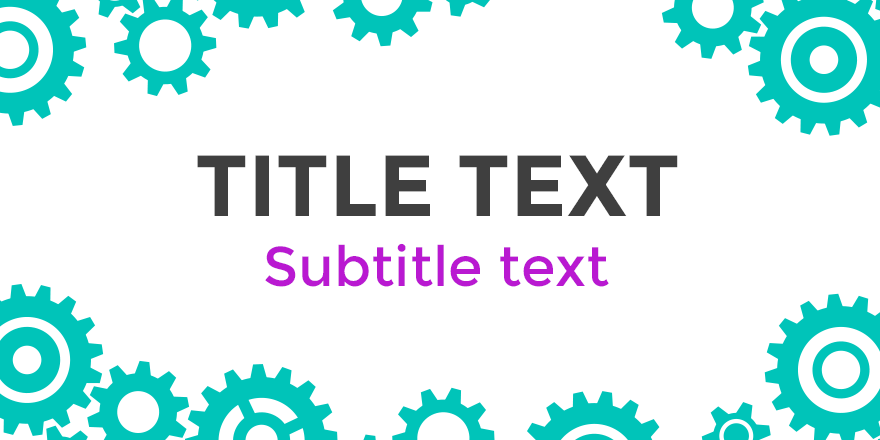
<style>
.page{position:relative;width:880px;height:440px;background:#ffffff}
.page>*{position:absolute;margin:0}
.t1{font:86.6px "Montserrat-Bold";color:#3f3f3f}
.t2{font:55.6px "Montserrat-Regular";color:#b919d1}
</style>
<div class="page">
<p class="t1" style="left:197px;top:155px;width:481px;height:61px">TITLE TEXT</p>
<p class="t2" style="left:265px;top:243px;width:344px;height:44px">Subtitle text</p>
</div>
